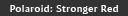
<style>
.page{position:relative;width:128px;height:16px;background:#333333}
.page>*{position:absolute;margin:0}
.t1{font:10px "AmiraParadiso";letter-spacing:0.05em;color:#ffffff}
</style>
<div class="page">
<p class="t1" style="left:10px;top:5px;width:108px;height:9px">Polaroid: Stronger Red</p>
</div>
